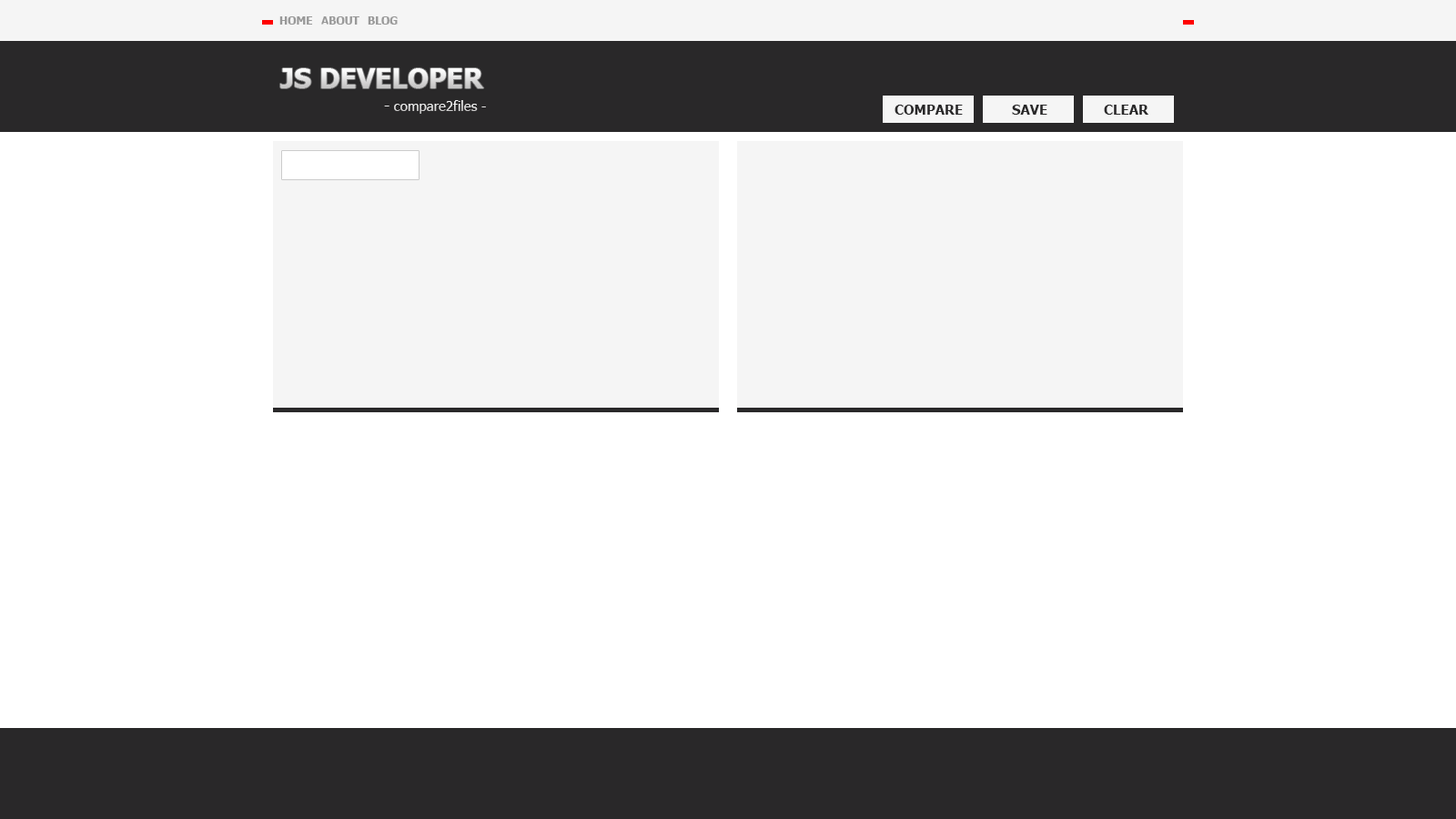
<style>
.page{position:relative;width:1456px;height:819px;background:#ffffff}
.page>*{position:absolute;margin:0}
.t1{font:10.9px "Tahoma-Bold";color:#999999;text-transform:uppercase}
.t2{font:27.3px "Tahoma-Bold";text-transform:uppercase}
.t3{font:13.6px "Tahoma";color:#e3e3e3}
.t4{font:13.6px "Tahoma-Bold";color:#e3e3e3}
.t5{font:13.6px "Tahoma-Bold";color:#292829}
</style>
<div class="page">
<p class="t1" style="left:279px;top:16px;width:34px;height:9px">Home</p>
<p class="t1" style="left:321px;top:16px;width:38px;height:9px">about</p>
<p class="t1" style="left:368px;top:16px;width:30px;height:9px">blog</p>
<p class="t2" style="left:280px;top:68px;width:204px;height:20px">js developer</p>
<p class="t3" style="left:384px;top:100px;width:102px;height:14px"><span class="t4">- </span>compare2files -</p>
<p class="t5" style="left:895px;top:105px;width:68px;height:10px">COMPARE</p>
<p class="t5" style="left:1012px;top:105px;width:35px;height:10px">SAVE</p>
<p class="t5" style="left:1104px;top:105px;width:44px;height:10px">CLEAR</p>
</div>
